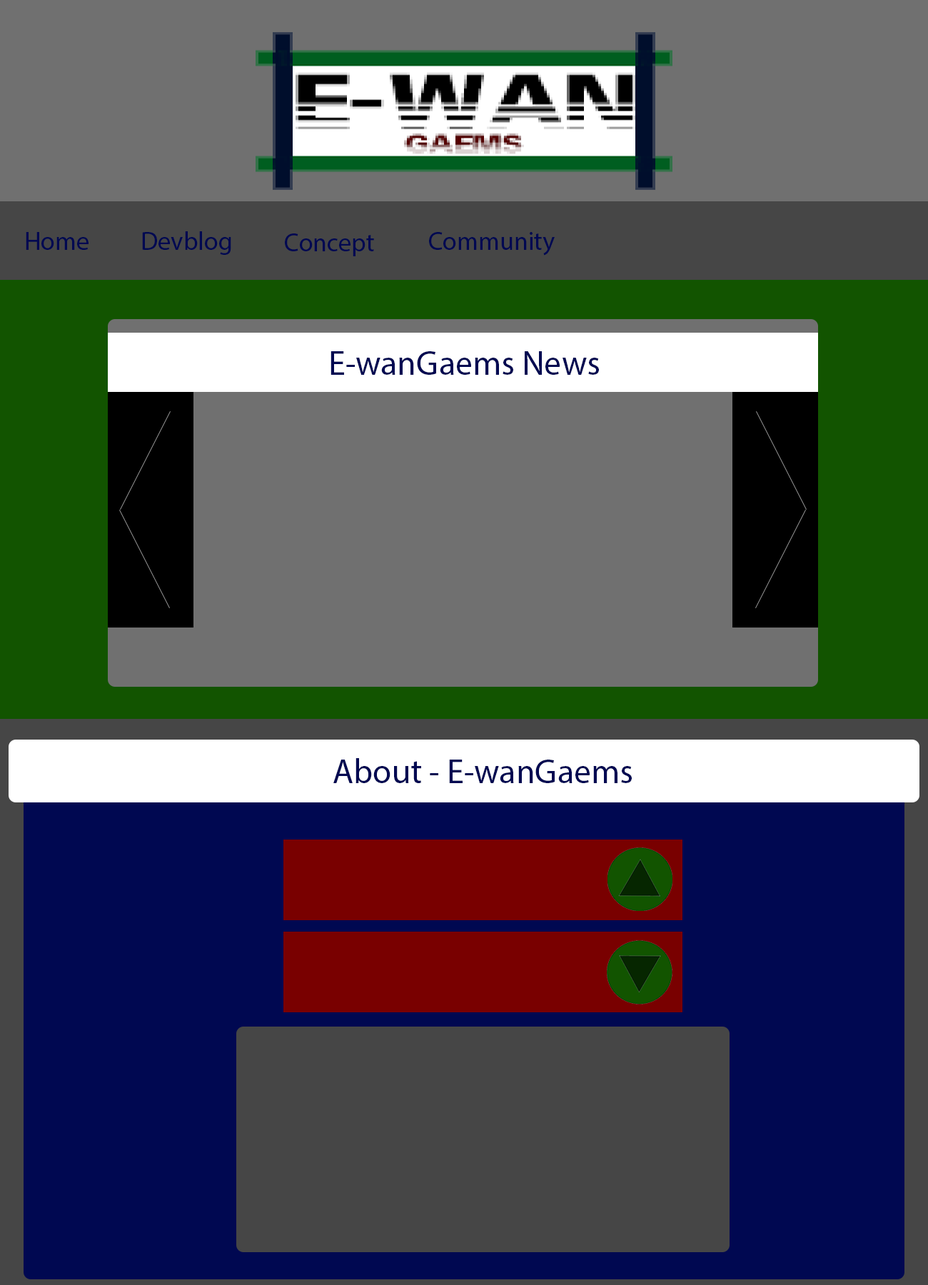
<style>
.page{position:relative;width:928px;height:1285px;background:#707070}
.page>*{position:absolute;margin:0}
.t1{font:25.7px "MyriadPro-Regular";color:#000851}
.t2{font:34.3px "MyriadPro-Regular";color:#000851}
</style>
<div class="page">
<p class="t1" style="left:26px;top:232px;width:63px;height:18px">Home</p>
<p class="t1" style="left:142px;top:231px;width:89px;height:24px">Devblog</p>
<p class="t1" style="left:285px;top:233px;width:89px;height:23px">Concept</p>
<p class="t1" style="left:429px;top:232px;width:126px;height:24px">Community</p>
<p class="t2" style="left:331px;top:351px;width:268px;height:24px">E-wanGaems News</p>
<p class="t2" style="left:333px;top:758px;width:299px;height:25px">About - E-wanGaems</p>
</div>
